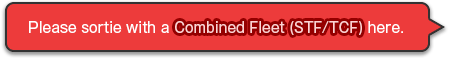
<style>
.page{position:relative;width:450px;height:58px;background:#ed3b3b}
.page>*{position:absolute;margin:0}
.t1{font:14px "GothicMB101Pro-Regular";color:#ffd3d3}
.t2{font:14px "GothicMB101Pro-Regular";color:#ffffff}
</style>
<div class="page">
<p class="t1" style="left:29px;top:21px;width:374px;height:14px"><span class="t2">Please sortie with a </span>Combined Fleet (STF/TCF)<span class="t2"> here.</span></p>
<p class="t1" style="left:29px;top:21px;width:374px;height:14px"><span class="t2">Please sortie with a </span>Combined Fleet (STF/TCF)<span class="t2"> here.</span></p>
</div>
